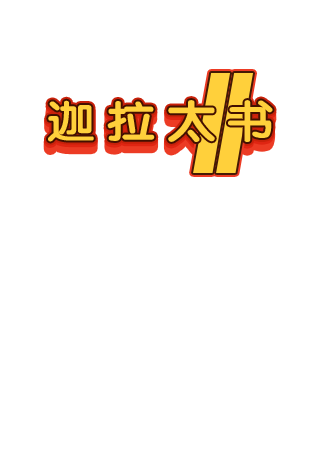
<style>
.page{position:relative;width:320px;height:460px;background:#ffffff}
.page>*{position:absolute;margin:0}
.t1{font:45px "JCuYuan";letter-spacing:0.2em;color:#ffd03b;scale:1.11 1}
</style>
<div class="page">
<p class="t1" style="left:48px;top:100px;width:225px;height:42px">迦拉太书</p>
<p class="t1" style="left:48px;top:100px;width:225px;height:42px">迦拉太书</p>
</div>
